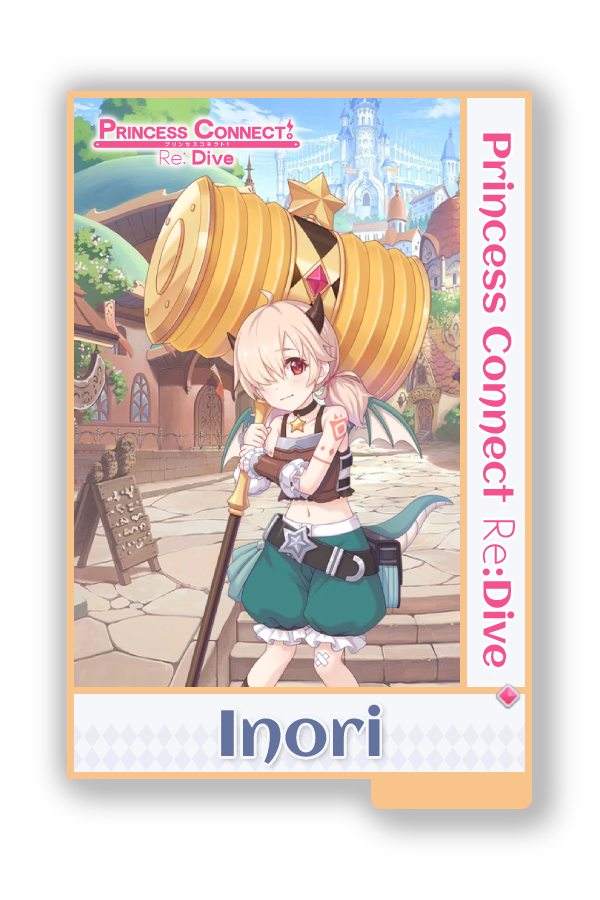
<style>
.page{position:relative;width:600px;height:900px;background:#ffffff}
.page>*{position:absolute;margin:0}
.t1{font:39px "Aclonica-Regular";color:#f55191}
.t2{font:39px "AaarghNormal";color:#f55191}
.t3{font:65px "Aclonica-Regular";color:#64739d}
</style>
<div class="page">
<p class="t1" style="left:478px;top:133px;width:38px;height:534px;rotate:90deg">Princess Connect <span class="t2">Re</span>:Dive</p>
<p class="t3" style="left:221px;top:704px;width:159px;height:60px">Inori</p>
</div>
